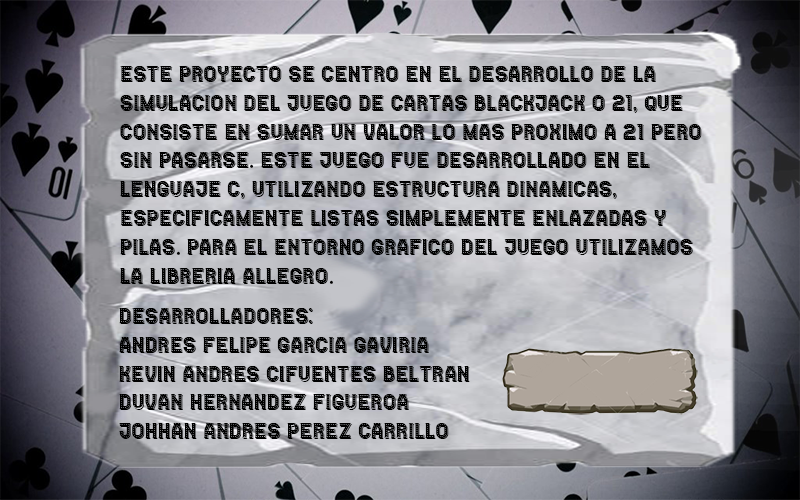
<style>
.page{position:relative;width:800px;height:500px}
.page>*{position:absolute;margin:0}
.t1{font:24px "CasinoShadow-Regular";color:#000000}
.t2{font:24px "MyriadPro-Regular";color:#000000}
</style>
<div class="page">
<p class="t1" style="left:120px;top:66px;width:582px;height:218px">Este proyecto se centro en el desarrollo de la <br>simulacion del juego de cartas BlackJack o 21, que <br>consiste en sumar un valor lo mas proximo a 21 pero <br>sin pasarse<span class="t2">.</span> Este juego fue desarrollado en el <br>lenguaje c, utilizando estructura dinamicas, <br>especificamente listas simplemente enlazadas y <br>pilas<span class="t2">.</span> Para el entorno grafico del juego utilizamos <br>la libreria allegro<span class="t2">.</span></p>
<p class="t1" style="left:119px;top:308px;width:351px;height:131px">Desarrolladores:<br>Andres Felipe Garcia Gaviria<br>Kevin Andres Cifuentes Beltran<br>Duvan Hernandez figueroa<br>Johhan Andres perez carrillo</p>
</div>
